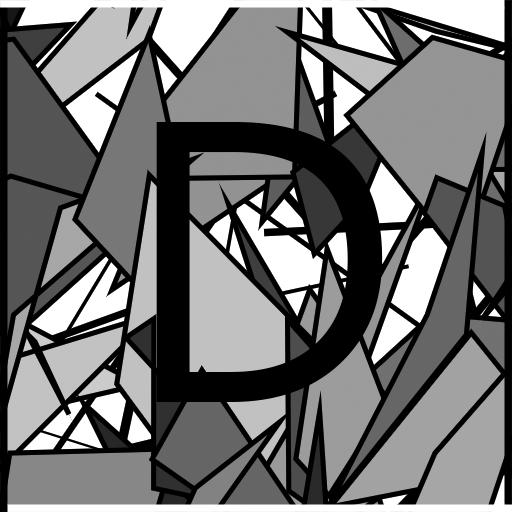
<style>
.page{position:relative;width:512px;height:512px;background:#000000}
.page>*{position:absolute;margin:0}
.t1{font:400px "Gadugi";color:#000000}
</style>
<div class="page">
<p class="t1" style="left:156px;top:122px;width:227px;height:280px">D</p>
</div>
